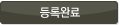
<style>
.page{position:relative;width:120px;height:25px;background:#444337}
.page>*{position:absolute;margin:0}
.t1{font:12.1px "YDIYGO330";color:#ffffff;scale:0.91 1}
</style>
<div class="page">
<p class="t1" style="left:40px;top:7px;width:40px;height:11px">등록완료</p>
</div>
